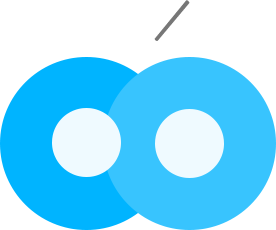
<style>
.page{position:relative;width:276px;height:230px;background:#ffffff}
.page>*{position:absolute;margin:0}
.t1{font:255.6px "GloberThinFree";color:#777777}
</style>
<div class="page">
<p class="t1" style="left:154px;top:0px;width:36px;height:41px">´</p>
</div>
